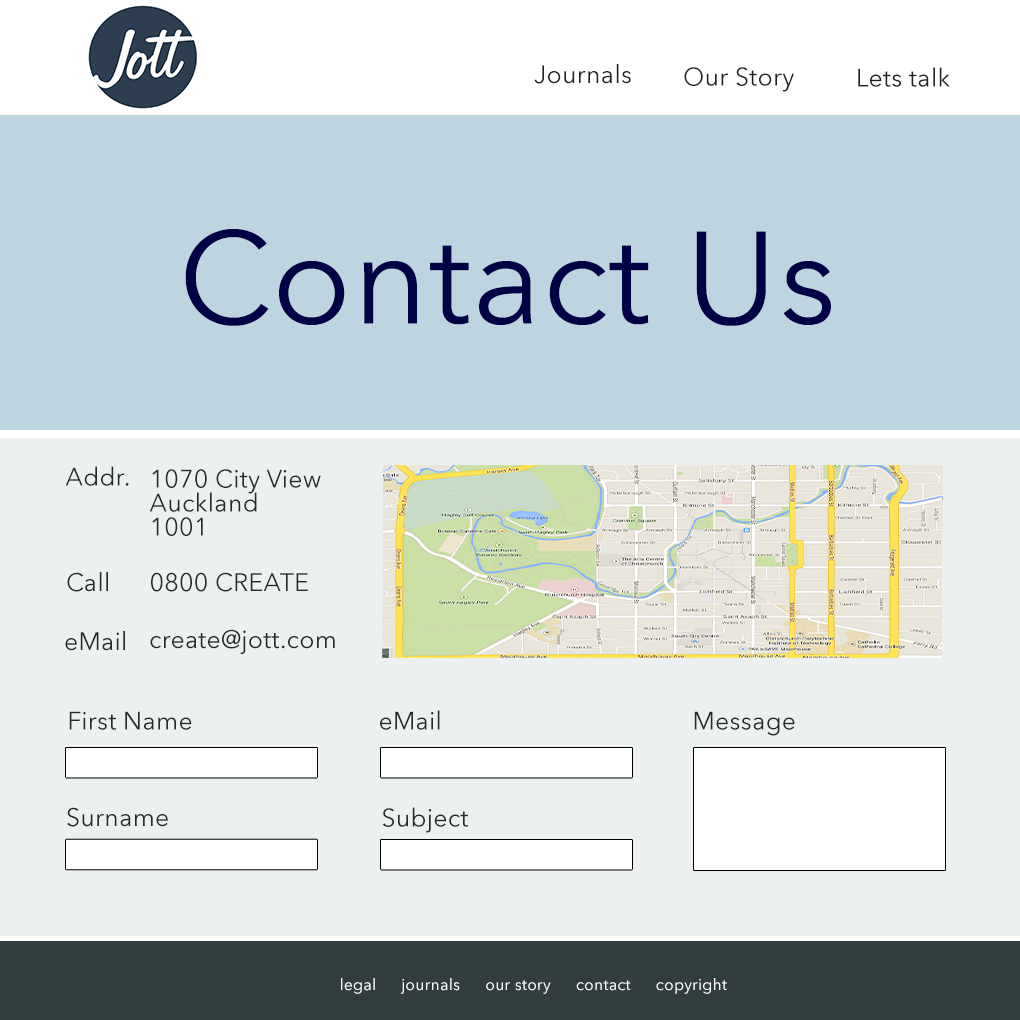
<style>
.page{position:relative;width:1020px;height:1020px;background:#ecf0f1}
.page>*{position:absolute;margin:0}
.t1{font:25px "AvenirNextLTW01-Regular";letter-spacing:0.01em;color:#222222}
.t2{font:130px "AvenirNextLTW01-Regular";letter-spacing:0.01em;color:#000044}
.t3{font:25px "AvenirNextLTW01-Regular";letter-spacing:0.01em;color:#282828}
.t4{font:25px/24px "AvenirNextLTW01-Regular";letter-spacing:0.01em;color:#282828}
.t5{font:16px "AvenirNextLTW01-Regular";letter-spacing:0.01em;color:#ffffff}
</style>
<div class="page">
<p class="t1" style="left:534px;top:64px;width:97px;height:20px">Journals</p>
<p class="t1" style="left:684px;top:67px;width:110px;height:25px">Our Story</p>
<p class="t1" style="left:858px;top:67px;width:92px;height:20px">Lets talk</p>
<p class="t2" style="left:185px;top:229px;width:646px;height:97px">Contact Us</p>
<p class="t3" style="left:65px;top:466px;width:64px;height:20px">Addr.</p>
<p class="t4" style="left:149px;top:469px;width:172px;height:67px">1070 City View<br>Auckland<br>1001</p>
<p class="t3" style="left:67px;top:572px;width:41px;height:20px">Call</p>
<p class="t3" style="left:151px;top:572px;width:157px;height:20px">0800 CREATE</p>
<p class="t3" style="left:150px;top:629px;width:185px;height:25px">create@jott.com</p>
<p class="t3" style="left:65px;top:631px;width:60px;height:20px">eMail</p>
<p class="t3" style="left:69px;top:711px;width:123px;height:19px">First Name</p>
<p class="t3" style="left:380px;top:710px;width:60px;height:20px">eMail</p>
<p class="t3" style="left:694px;top:711px;width:101px;height:25px">Message</p>
<p class="t3" style="left:67px;top:807px;width:101px;height:20px">Surname</p>
<p class="t3" style="left:382px;top:807px;width:86px;height:26px">Subject</p>
<p class="t5" style="left:341px;top:978px;width:386px;height:16px">legal      journals      our story      contact      copyright</p>
</div>
